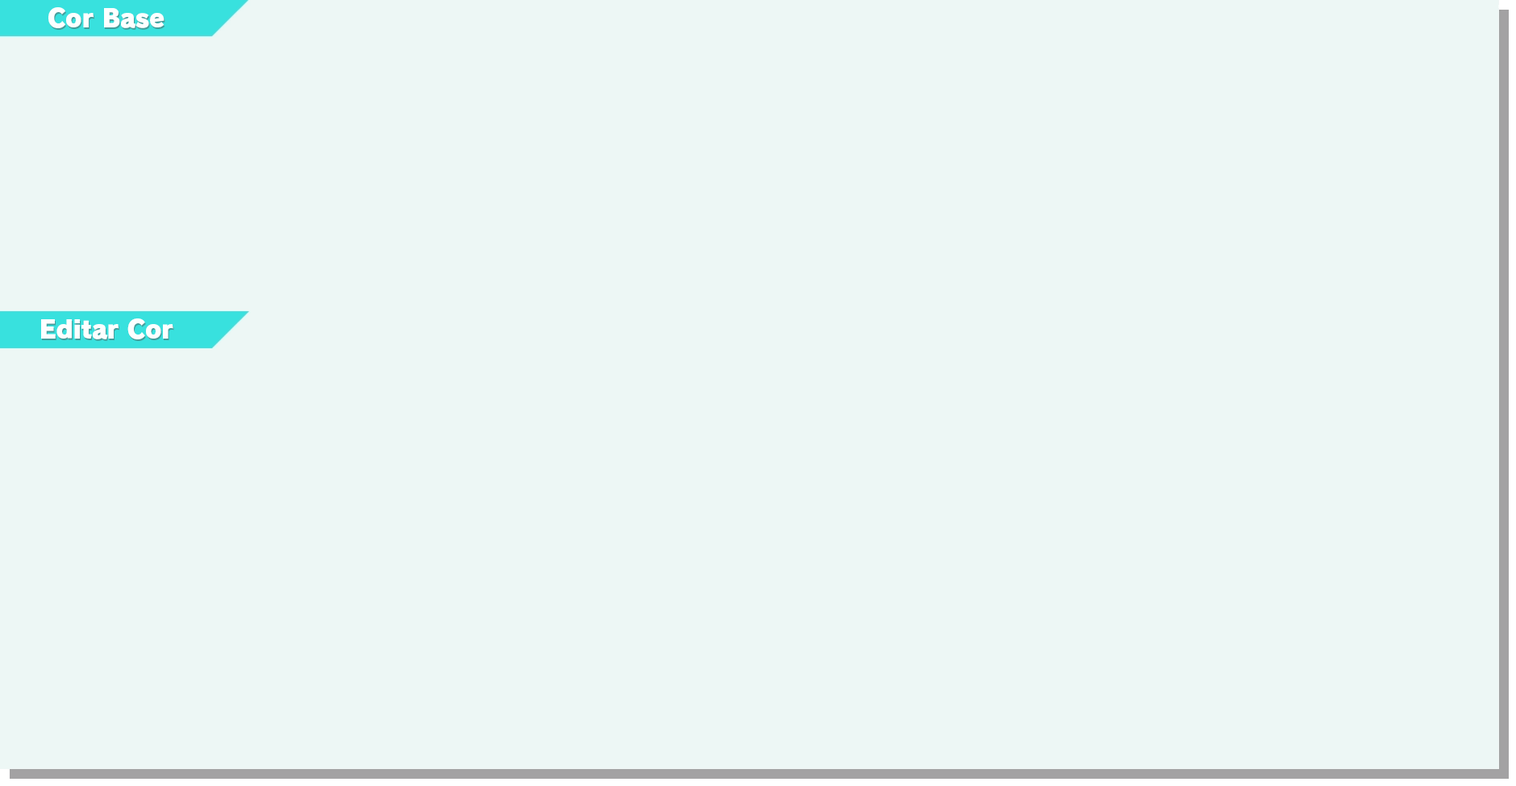
<style>
.page{position:relative;width:1516px;height:786px;background:#edf7f5}
.page>*{position:absolute;margin:0}
.t1{font:24.7px "RodinPro-UB";letter-spacing:-0.014em;color:#fdffff}
</style>
<div class="page">
<p class="t1" style="left:48px;top:7px;width:117px;height:21px">Cor Base</p>
<p class="t1" style="left:41px;top:319px;width:132px;height:21px">Editar Cor</p>
</div>
